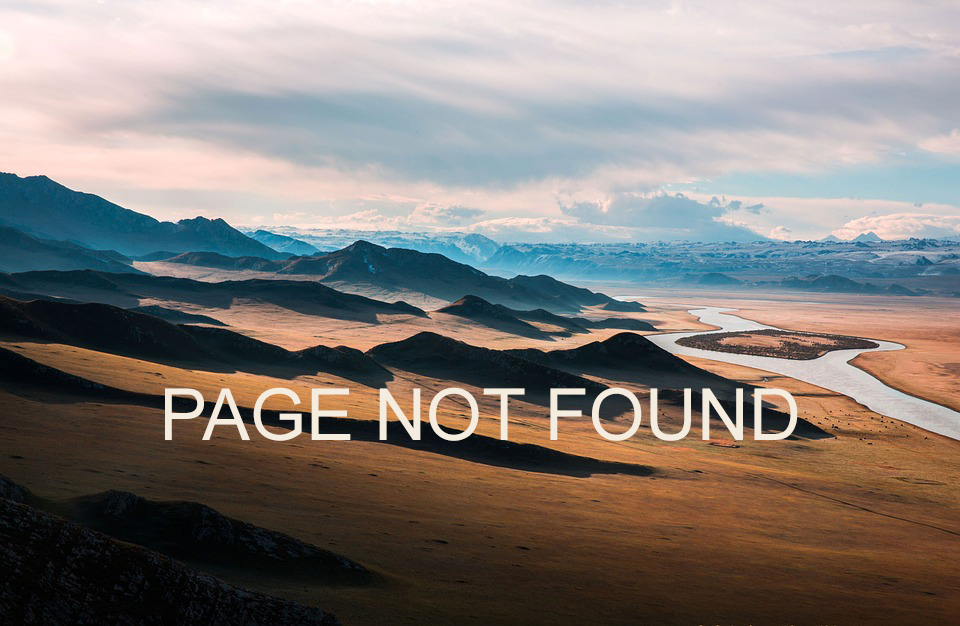
<style>
.page{position:relative;width:960px;height:626px}
.page>*{position:absolute;margin:0}
.t1{font:72px "ArialMT";color:#f4ecde}
</style>
<div class="page">
<p class="t1" style="left:165px;top:387px;width:633px;height:54px">PAGE NOT FOUND</p>
</div>
